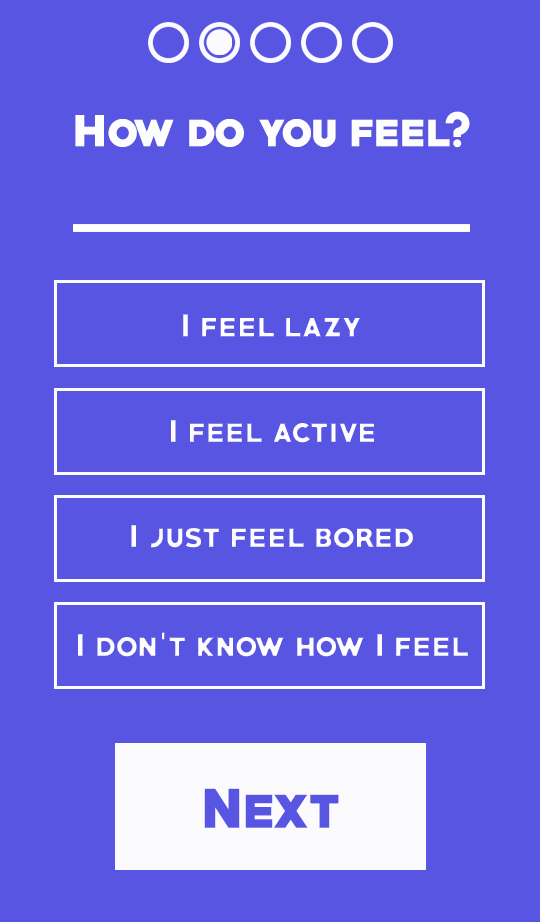
<style>
.page{position:relative;width:540px;height:922px;background:#5955e3}
.page>*{position:absolute;margin:0}
.t1{font:40px "PRIMETIME-Regular";color:#fdfdfd}
.t2{font:30px "PRIMETIME-Regular"}
.t3{font:30px "PRIMETIME-Regular";color:#fdfdfd}
.t4{font:50px "PRIMETIME-Regular";color:#5955e3}
</style>
<div class="page">
<p class="t1" style="left:75px;top:111px;width:395px;height:37px">How do you feel?</p>
<p class="t2" style="left:182px;top:313px;width:180px;height:25px">I feel lazy</p>
<p class="t2" style="left:170px;top:419px;width:205px;height:25px">I feel active</p>
<p class="t2" style="left:130px;top:524px;width:284px;height:25px">I just feel bored</p>
<p class="t3" style="left:77px;top:631px;width:392px;height:27px">I don’t know how I feel</p>
<p class="t4" style="left:204px;top:788px;width:135px;height:40px">Next</p>
</div>
